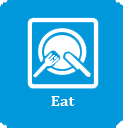
<style>
.page{position:relative;width:123px;height:128px;background:#0098da}
.page>*{position:absolute;margin:0}
.t1{font:16px "Cambria-Bold";color:#ffffff}
</style>
<div class="page">
<p class="t1" style="left:51px;top:96px;width:24px;height:10px">Eat</p>
</div>
